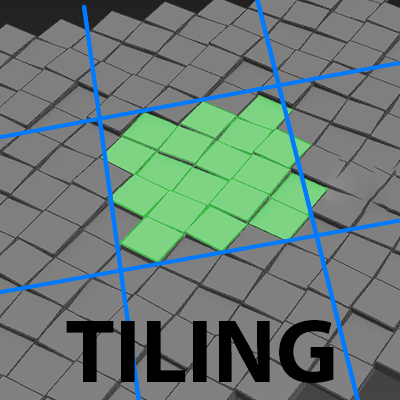
<style>
.page{position:relative;width:400px;height:400px;background:#7f7f7f}
.page>*{position:absolute;margin:0}
.t1{font:91.1px "MyriadPro-Bold";color:#000000}
</style>
<div class="page">
<p class="t1" style="left:66px;top:320px;width:268px;height:63px">TILING</p>
</div>
